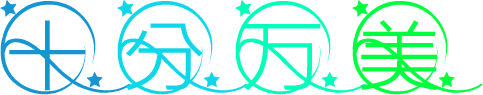
<style>
.page{position:relative;width:483px;height:95px;background:#ffffff}
.page>*{position:absolute;margin:0}
.t1{font:100px "Qisi--Medium";letter-spacing:0.2em;color:#1595d1}
.t2{font:100px "Qisi--Medium";letter-spacing:0.2em;color:#0ed7e9}
.t3{font:100px "Qisi--Medium";letter-spacing:0.2em;color:#00ffba}
.t4{font:100px "Qisi--Medium";letter-spacing:0.2em;color:#00ff3c}
</style>
<div class="page">
<p class="t1" style="left:0px;top:0px;width:131px;height:95px">十</p>
<p class="t2" style="left:117px;top:0px;width:131px;height:95px">分</p>
<p class="t3" style="left:235px;top:0px;width:131px;height:95px">万</p>
<p class="t4" style="left:352px;top:0px;width:131px;height:95px">美</p>
</div>
